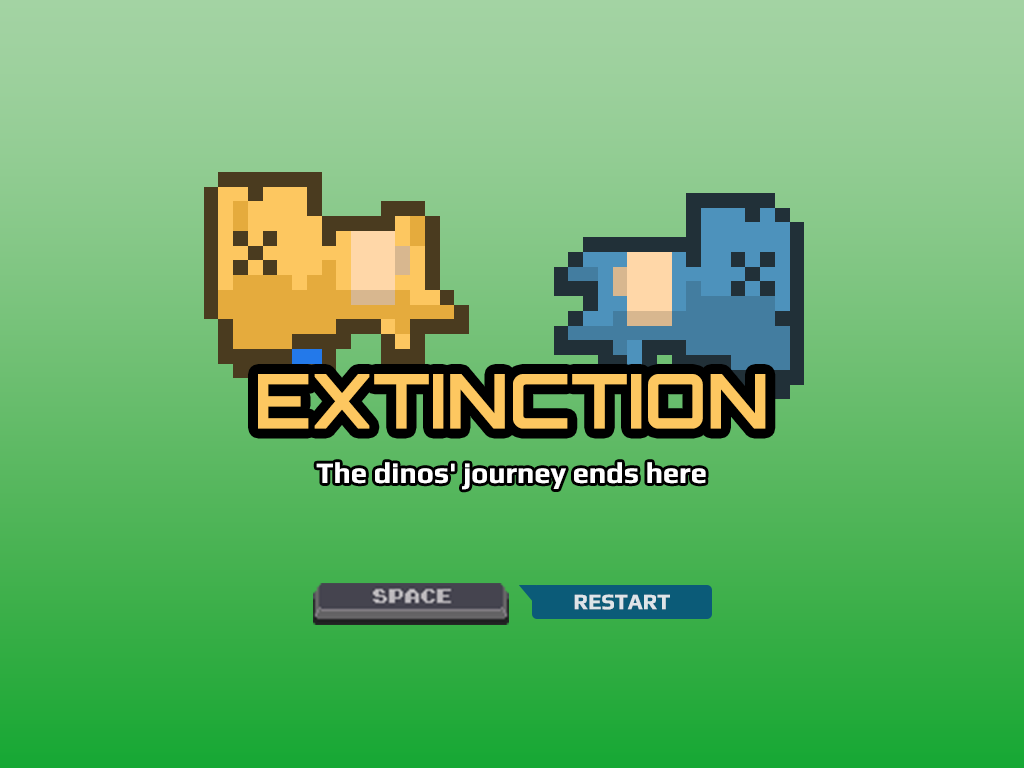
<style>
.page{position:relative;width:1024px;height:768px}
.page>*{position:absolute;margin:0}
.t1{font:75.4px "Orbitron-Bold";color:#fdc760}
.t2{font:29px "Play-Bold";color:#ffffff}
.t3{font:22px "Play-Bold";color:#dee4e8}
</style>
<div class="page">
<p class="t1" style="left:258px;top:374px;width:508px;height:55px">EXTINCTION</p>
<p class="t2" style="left:316px;top:462px;width:390px;height:28px">The dinos' journey ends here</p>
<p class="t3" style="left:574px;top:594px;width:96px;height:16px">RESTART</p>
</div>
